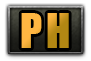
<style>
.page{position:relative;width:91px;height:61px}
.page>*{position:absolute;margin:0}
.t1{font:44px "Impact";letter-spacing:0.08em}
</style>
<div class="page">
<p class="t1" style="left:21px;top:13px;width:48px;height:35px">PH</p>
</div>
